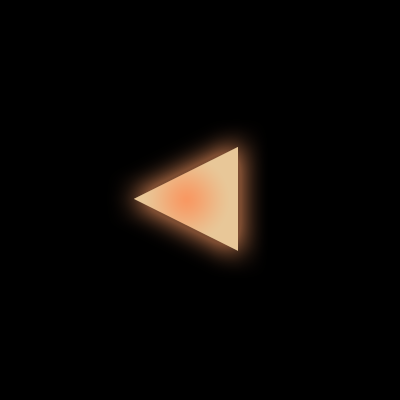
<style>
.page{position:relative;width:400px;height:400px;background:#000000}
.page>*{position:absolute;margin:0}
.t1{font:150.3px "TimesNewRomanPSMT";color:#e8c798}
</style>
<div class="page">
<p class="t1" style="left:134px;top:147px;width:104px;height:104px;rotate:-90deg">▲</p>
</div>
